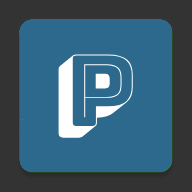
<style>
.page{position:relative;width:192px;height:192px;background:#2c698d}
.page>*{position:absolute;margin:0}
.t1{font:98px "BungeeShade-Regular";color:#ffffff;scale:1.04 1}
</style>
<div class="page">
<p class="t1" style="left:58px;top:54px;width:75px;height:84px">P</p>
</div>
